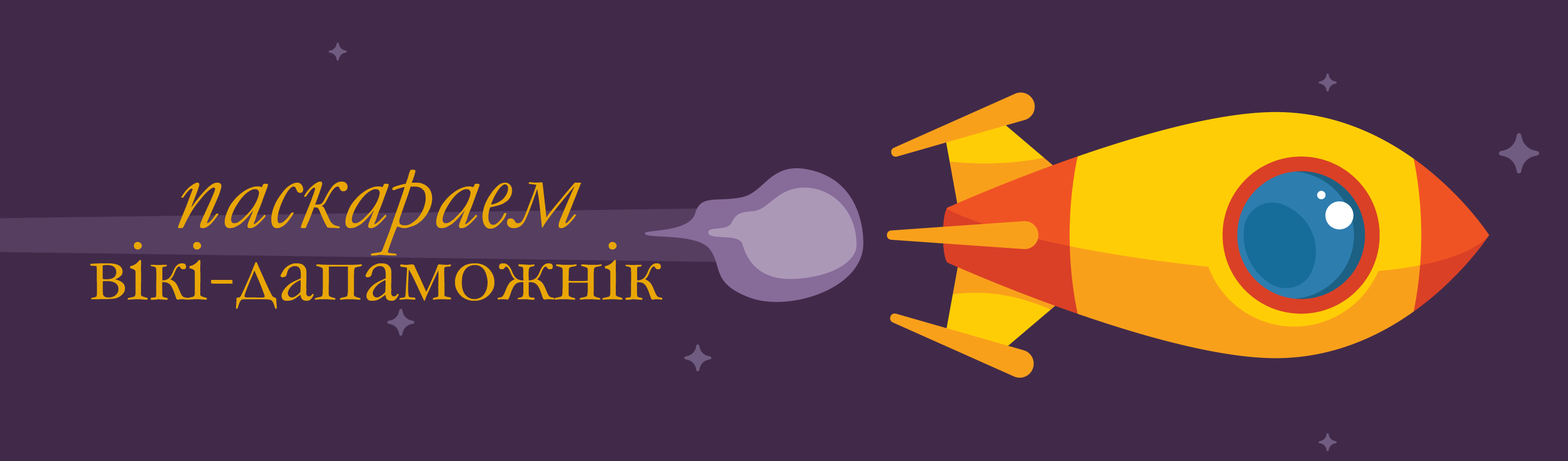
<style>
.page{position:relative;width:1568px;height:461px;background:#412a49}
.page>*{position:absolute;margin:0}
.t1{font:89.6px/71.7px "Garamond";color:#e9a606}
.t2{font:111.3px/71.7px "Garamond-Italic";color:#e9a606}
</style>
<div class="page">
<p class="t1" style="left:90px;top:169px;width:572px;height:140px;text-align:center"><span class="t2">паскараем<br></span>вікі-дапаможнік</p>
</div>
